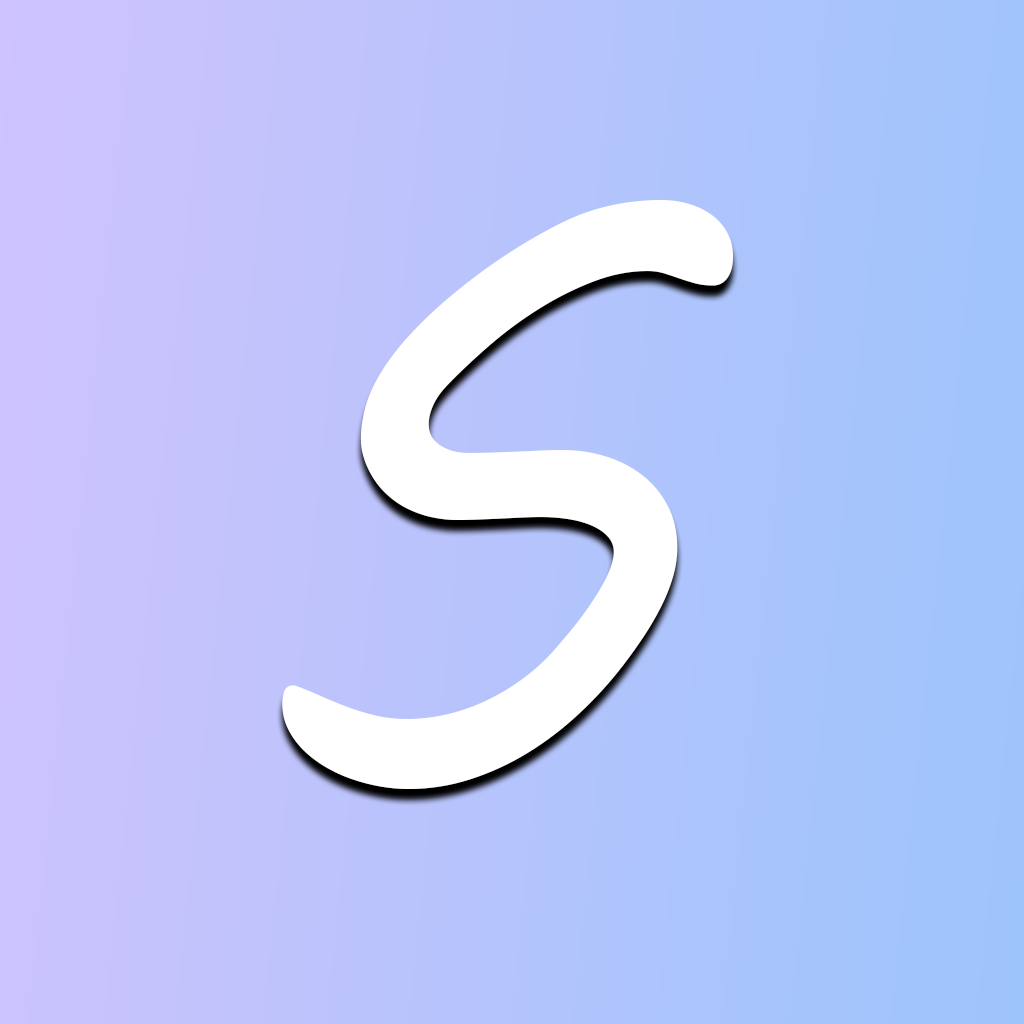
<style>
.page{position:relative;width:1024px;height:1024px}
.page>*{position:absolute;margin:0}
.t1{font:741.6px "MVBoli";color:#ffffff}
</style>
<div class="page">
<p class="t1" style="left:282px;top:200px;width:451px;height:589px">S</p>
</div>
